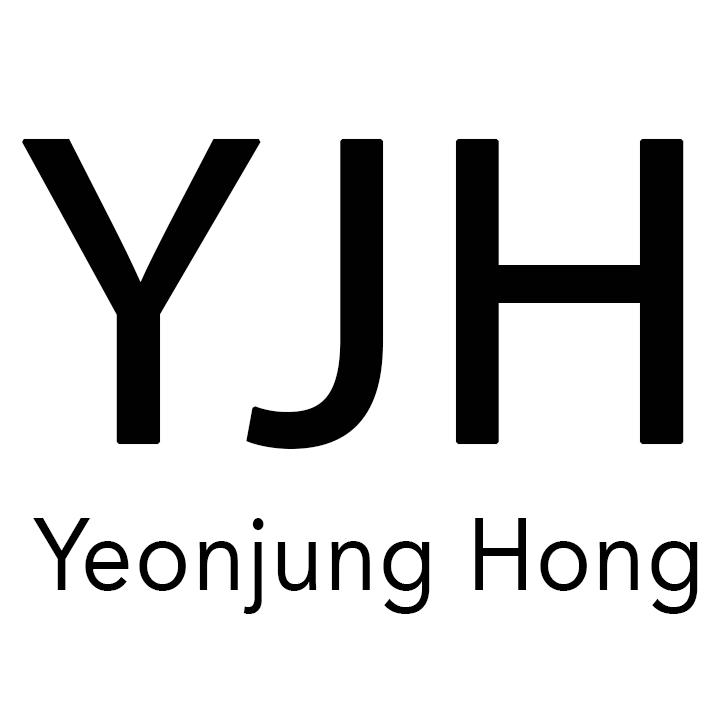
<style>
.page{position:relative;width:728px;height:728px;background:#ffffff}
.page>*{position:absolute;margin:0}
.t1{font:446.1px "MyriadPro-Regular";color:#010101;text-transform:uppercase;font-weight:bold}
.t2{font:446.1px "MyriadPro-Regular";letter-spacing:0.03em;color:#010101;text-transform:uppercase;font-weight:bold}
.t3{font:102.2px "Avenir-Roman";letter-spacing:0.025em;color:#000000;scale:0.91 1}
</style>
<div class="page">
<p class="t1" style="left:22px;top:138px;width:662px;height:312px">YJ<span class="t2">H</span></p>
<p class="t3" style="left:33px;top:518px;width:665px;height:96px">Yeonjung Hong</p>
</div>
